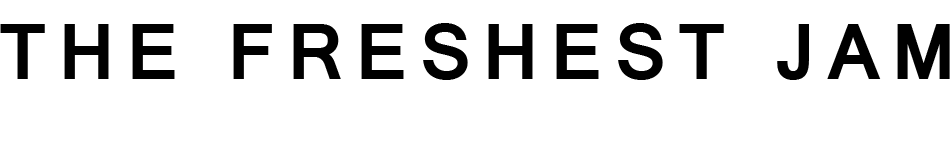
<style>
.page{position:relative;width:950px;height:158px;background:#ffffff}
.page>*{position:absolute;margin:0}
.t1{font:85.3px "Raavi-Bold";letter-spacing:0.124em;color:#000000}
</style>
<div class="page">
<p class="t1" style="left:0px;top:23px;width:950px;height:57px">THE FRESHEST JAM</p>
</div>
